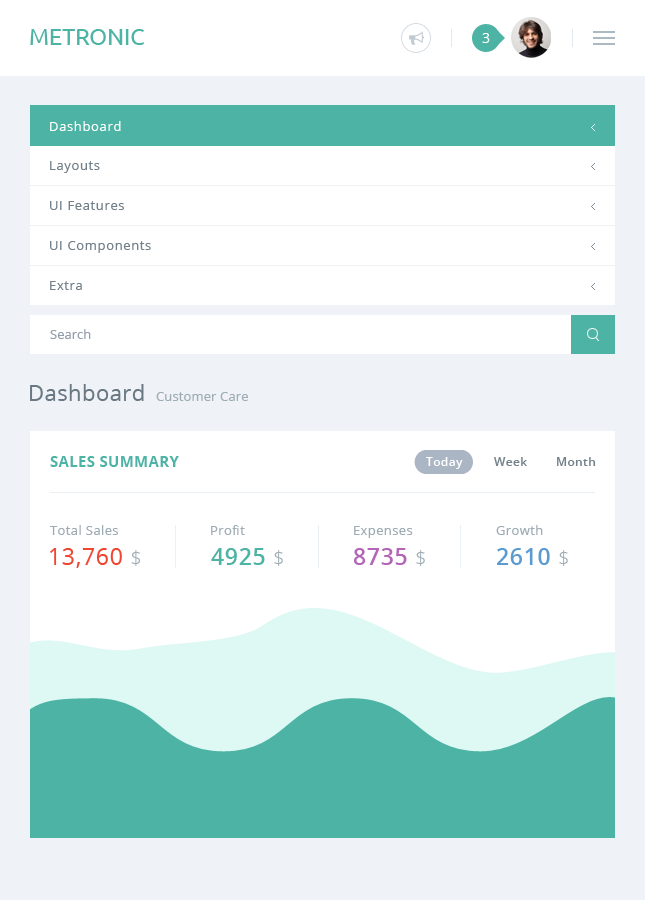
<style>
.page{position:relative;width:645px;height:900px;background:#ffffff}
.page>*{position:absolute;margin:0}
.t1{font:23px "Ubuntu";color:#4db3a4}
.t2{font:14px "OpenSans";color:#ffffff}
.t3{font:13px "OpenSans";letter-spacing:0.05em;color:#ffffff}
.t4{font:13px "OpenSans";letter-spacing:0.05em;color:#72808a}
.t5{font:13px "OpenSans";color:#949da9}
.t6{font:22px "OpenSans";letter-spacing:0.02em;color:#697882}
.t7{font:13px "OpenSans";letter-spacing:0.01em;color:#9eacb4}
.t8{font:15px "OpenSans-Bold";letter-spacing:0.02em;color:#4db3a4}
.t9{font:12px "OpenSans-Semibold";letter-spacing:0.03em;color:#ffffff}
.t10{font:12px "OpenSans-Semibold";letter-spacing:0.03em;color:#73818a}
.t11{font:13px "OpenSans";letter-spacing:0.03em;color:#9eacb4}
.t12{font:23px "OpenSans";letter-spacing:0.03em;color:#f04531}
.t13{font:20px "OpenSans-Light";letter-spacing:0.03em;color:#9eacb4}
.t14{font:23px "OpenSans-Semibold";letter-spacing:0.03em;color:#4db3a4}
.t15{font:23px "OpenSans-Semibold";letter-spacing:0.03em;color:#b465b7}
.t16{font:23px "OpenSans-Semibold";letter-spacing:0.03em;color:#5b9bd1}
</style>
<div class="page">
<p class="t1" style="left:30px;top:29px;width:114px;height:16px">METRONIC</p>
<p class="t2" style="left:482px;top:33px;width:8px;height:10px">3</p>
<p class="t3" style="left:50px;top:121px;width:71px;height:10px">Dashboard</p>
<p class="t4" style="left:50px;top:161px;width:50px;height:12px">Layouts</p>
<p class="t4" style="left:50px;top:201px;width:74px;height:9px">UI Features</p>
<p class="t4" style="left:50px;top:241px;width:101px;height:12px">UI Components</p>
<p class="t4" style="left:50px;top:281px;width:32px;height:9px">Extra</p>
<p class="t5" style="left:50px;top:329px;width:41px;height:10px">Search</p>
<p class="t6" style="left:30px;top:384px;width:114px;height:17px">Dashboard</p>
<p class="t7" style="left:156px;top:392px;width:92px;height:9px">Customer Care</p>
<p class="t8" style="left:50px;top:456px;width:129px;height:11px">SALES SUMMARY</p>
<p class="t9" style="left:426px;top:457px;width:37px;height:12px">Today</p>
<p class="t10" style="left:494px;top:457px;width:33px;height:9px">Week</p>
<p class="t10" style="left:557px;top:457px;width:39px;height:9px">Month</p>
<p class="t11" style="left:50px;top:525px;width:68px;height:10px">Total Sales</p>
<p class="t11" style="left:211px;top:525px;width:34px;height:10px">Profit</p>
<p class="t11" style="left:354px;top:526px;width:59px;height:12px">Expenses</p>
<p class="t11" style="left:496px;top:525px;width:47px;height:10px">Growth</p>
<p class="t12" style="left:50px;top:548px;width:90px;height:20px">13,760 <span class="t13">$</span></p>
<p class="t14" style="left:211px;top:548px;width:72px;height:18px">4925 <span class="t13">$</span></p>
<p class="t15" style="left:354px;top:548px;width:71px;height:18px">8735 <span class="t13">$</span></p>
<p class="t16" style="left:497px;top:548px;width:71px;height:18px">2610 <span class="t13">$</span></p>
</div>
